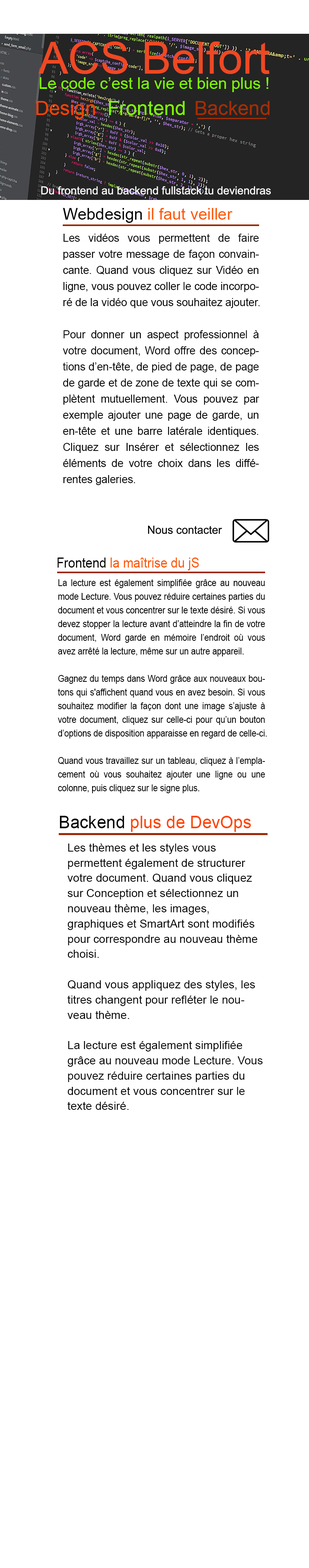
<style>
.page{position:relative;width:309px;height:1568px;background:#ffffff}
.page>*{position:absolute;margin:0}
.t1{font:44.2px "ArialMT";color:#ef4823}
.t2{font:16px "ArialMT";color:#7ffc02}
.t3{font:19.7px "ArialMT";color:#7ffc02}
.t4{font:19.7px "ArialMT";color:#fb4201}
.t5{font:19.7px "ArialMT";color:#a72d02}
.t6{font:11.1px "ArialMT";color:#ffffff}
.t7{font:16.1px "ArialMT";color:#fd5805}
.t8{font:16.1px "ArialMT";color:#000000}
.t9{font:10.7px/16.1px "ArialMT";color:#000000}
.t10{font:11.2px "ArialMT";color:#000000}
.t11{font:13.7px "ArialMT";color:#fd5501;scale:0.91 1}
.t12{font:13.7px "ArialMT";color:#000000;scale:0.91 1}
.t13{font:9.1px/13.7px "ArialMT";color:#000000;scale:0.91 1}
.t14{font:17.1px "ArialMT";color:#fe4402}
.t15{font:17.1px "ArialMT";color:#000000}
.t16{font:11.4px/15.2px "ArialMT";color:#000000}
</style>
<div class="page">
<p class="t1" style="left:38px;top:41px;width:232px;height:33px">ACS Belfort</p>
<p class="t2" style="left:40px;top:77px;width:228px;height:15px">Le code c’est la vie et bien plus !</p>
<p class="t3" style="left:36px;top:101px;width:234px;height:18px"><span class="t4">Design </span>Frontend <span class="t5">Backend</span></p>
<p class="t6" style="left:41px;top:186px;width:230px;height:9px">Du frontend au backend fullstack tu deviendras</p>
<p class="t7" style="left:63px;top:208px;width:170px;height:15px"><span class="t8">Webdesign </span>il faut veiller</p>
<p class="t9" style="left:63px;top:234px;width:197px;height:251px;text-align:justify">Les vidéos vous permettent de faire passer votre message de façon convaincante. Quand vous cliquez sur Vidéo en ligne, vous pouvez coller le code incorporé de la vidéo que vous souhaitez ajouter. <br><br>Pour donner un aspect professionnel à votre document, Word offre des conceptions d’en-tête, de pied de page, de page de garde et de zone de texte qui se complètent mutuellement. Vous pouvez par exemple ajouter une page de garde, un en-tête et une barre latérale identiques. Cliquez sur Insérer et sélectionnez les éléments de votre choix dans les différentes galeries.</p>
<p class="t10" style="left:148px;top:525px;width:74px;height:9px">Nous contacter</p>
<p class="t11" style="left:58px;top:558px;width:141px;height:12px"><span class="t12">Frontend </span>la maîtrise du jS</p>
<p class="t13" style="left:58px;top:579px;width:209px;height:214px;text-align:justify">La lecture est également simplifiée grâce au nouveau mode Lecture. Vous pouvez réduire certaines parties du document et vous concentrer sur le texte désiré. Si vous devez stopper la lecture avant d’atteindre la fin de votre document, Word garde en mémoire l’endroit où vous avez arrêté la lecture, même sur un autre appareil.<br><br>Gagnez du temps dans Word grâce aux nouveaux boutons qui s'affichent quand vous en avez besoin. Si vous souhaitez modifier la façon dont une image s’ajuste à votre document, cliquez sur celle-ci pour qu’un bouton d’options de disposition apparaisse en regard de celle-ci. <br><br>Quand vous travaillez sur un tableau, cliquez à l’emplacement où vous souhaitez ajouter une ligne ou une colonne, puis cliquez sur le signe plus.</p>
<p class="t14" style="left:60px;top:816px;width:191px;height:16px"><span class="t15">Backend </span>plus de DevOps</p>
<p class="t16" style="left:68px;top:844px;width:195px;height:266px">Les thèmes et les styles vous permettent également de structurer votre document. Quand vous cliquez sur Conception et sélectionnez un nouveau thème, les images, graphiques et SmartArt sont modifiés pour correspondre au nouveau thème choisi.<br><br>Quand vous appliquez des styles, les titres changent pour refléter le nouveau thème.<br><br>La lecture est également simplifiée grâce au nouveau mode Lecture. Vous pouvez réduire certaines parties du document et vous concentrer sur le texte désiré.</p>
</div>
